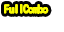
<style>
.page{position:relative;width:64px;height:32px;background:#ffffff}
.page>*{position:absolute;margin:0}
.t1{font:12px "DFMaruGothic-SU-WIN-RKSJ-H";letter-spacing:-0.1em;color:#fbfe00}
</style>
<div class="page">
<p class="t1" style="left:4px;top:4px;width:45px;height:10px">FullCombo</p>
</div>
